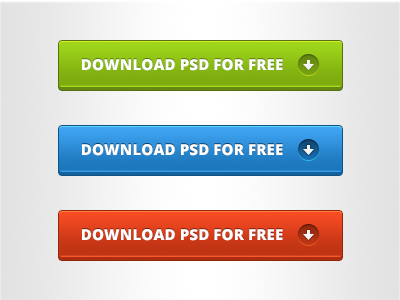
<style>
.page{position:relative;width:400px;height:300px}
.page>*{position:absolute;margin:0}
.t1{font:15px "OpenSans-Extrabold";letter-spacing:0.01em;color:#ffffff;text-transform:uppercase}
</style>
<div class="page">
<p class="t1" style="left:82px;top:59px;width:201px;height:12px">Download psd for free</p>
<p class="t1" style="left:82px;top:144px;width:201px;height:12px">Download psd for free</p>
<p class="t1" style="left:82px;top:229px;width:201px;height:12px">Download psd for free</p>
</div>
